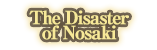
<style>
.page{position:relative;width:157px;height:50px;background:#ffffff}
.page>*{position:absolute;margin:0}
.t1{font:18px/15px "RyuminPro-ExBold";letter-spacing:-0.08em;color:#f7e998;font-weight:bold}
</style>
<div class="page">
<p class="t1" style="left:29px;top:10px;width:100px;height:30px;text-align:center">The Disaster<br>of Nosaki</p>
</div>
